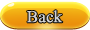
<style>
.page{position:relative;width:90px;height:30px}
.page>*{position:absolute;margin:0}
.t1{font:16.7px "David";color:#d3d3d3;font-weight:bold}
</style>
<div class="page">
<p class="t1" style="left:27px;top:10px;width:36px;height:13px">Back</p>
</div>
